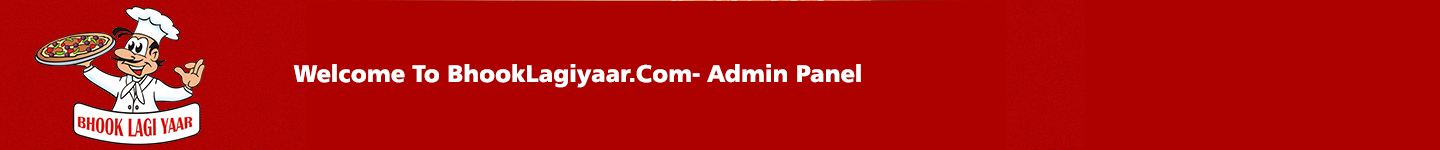
<style>
.page{position:relative;width:1440px;height:150px;background:#ad0100}
.page>*{position:absolute;margin:0}
.t1{font:24px "Humanist777BT-BlackB";color:#ffffff}
</style>
<div class="page">
<p class="t1" style="left:293px;top:64px;width:568px;height:24px">Welcome To BhookLagiyaar.Com- Admin Panel</p>
</div>
